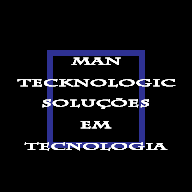
<style>
.page{position:relative;width:192px;height:192px;background:#000000}
.page>*{position:absolute;margin:0}
.t1{font:9px "CharlemagneStd-Bold";color:#ffffff;font-weight:bold;scale:2 1}
</style>
<div class="page">
<p class="t1" style="left:17px;top:57px;width:159px;height:31px;text-align:center">man<br>tecknologic</p>
<p class="t1" style="left:17px;top:57px;width:159px;height:31px;text-align:center">man<br>tecknologic</p>
<p class="t1" style="left:17px;top:57px;width:159px;height:31px;text-align:center">man<br>tecknologic</p>
<p class="t1" style="left:17px;top:57px;width:159px;height:31px;text-align:center">man<br>tecknologic</p>
<p class="t1" style="left:24px;top:98px;width:144px;height:53px;text-align:center">Soluções<br>em<br>tecnologia</p>
<p class="t1" style="left:24px;top:98px;width:144px;height:53px;text-align:center">Soluções<br>em<br>tecnologia</p>
<p class="t1" style="left:24px;top:98px;width:144px;height:53px;text-align:center">Soluções<br>em<br>tecnologia</p>
<p class="t1" style="left:24px;top:98px;width:144px;height:53px;text-align:center">Soluções<br>em<br>tecnologia</p>
</div>
